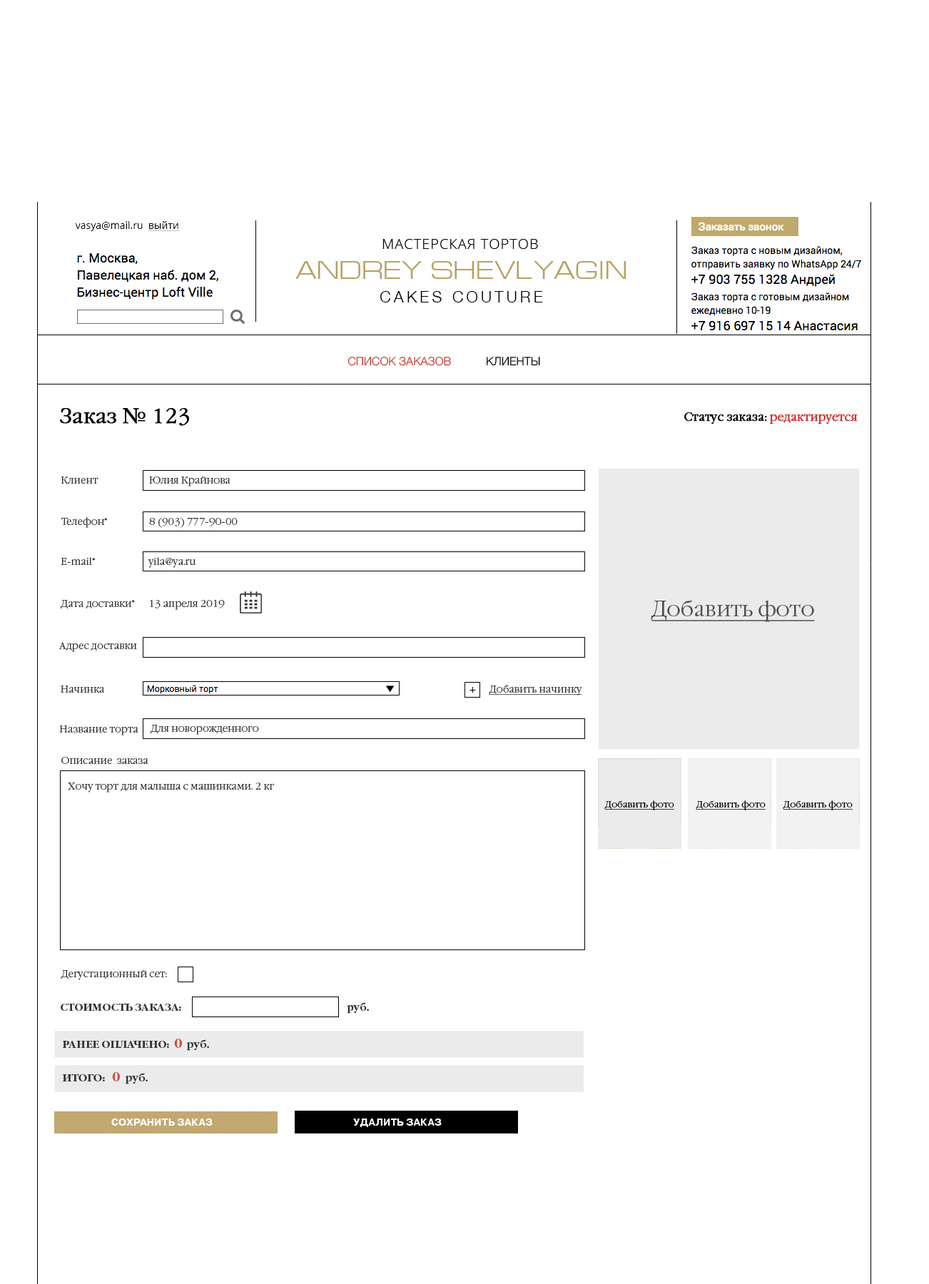
<style>
.page{position:relative;width:929px;height:1284px;background:#ffffff}
.page>*{position:absolute;margin:0}
.t1{font:11.4px "Helvetica-Light";color:#c03728;text-transform:uppercase}
.t2{font:11.4px "Helvetica-Light";color:#000000;text-transform:uppercase}
.t3{font:20.3px "GaramondC-Light";color:#000000;font-weight:bold}
.t4{font:11.4px "GaramondC-Light";color:#000000;font-weight:bold}
.t5{font:11.4px "GaramondC-Light";color:#cc3333;font-weight:bold}
.t6{font:10px "GaramondC-Light";color:#333333}
.t7{font:21.4px "GaramondC-Light";color:#4f4f4f;text-decoration:underline}
.t8{font:10px "GaramondC-Light";color:#000000}
.t9{font:10px "GaramondC-Light";color:#333333;text-decoration:underline}
.t10{font:9.1px "GaramondC-Light";color:#000000;text-decoration:underline}
.t11{font:10px "GaramondC-Bold";color:#333333}
.t12{font:12.8px "GaramondC-Bold";color:#ce4c3e}
.t13{font:10px "PragmaticaBold-Reg";color:#ffffff}
</style>
<div class="page">
<p class="t1" style="left:347px;top:357px;width:193px;height:9px">Список заказов<span class="t2">           Клиенты</span></p>
<p class="t3" style="left:60px;top:408px;width:129px;height:18px">Заказ № 123</p>
<p class="t4" style="left:684px;top:412px;width:173px;height:12px">Статус заказа:<span class="t5"> редактируется</span></p>
<p class="t6" style="left:61px;top:476px;width:169px;height:10px">Клиент                      Юлия Крайнова</p>
<p class="t6" style="left:61px;top:517px;width:177px;height:11px">Телефон*                  8 (903) 777-90-00</p>
<p class="t6" style="left:61px;top:557px;width:134px;height:11px">E-mail*                       yila@ya.ru</p>
<p class="t6" style="left:60px;top:599px;width:165px;height:11px">Дата доставки*      13 апреля 2019</p>
<p class="t7" style="left:651px;top:600px;width:164px;height:22px">Добавить фото</p>
<p class="t6" style="left:58px;top:642px;width:79px;height:10px">Адрес доставки</p>
<p class="t6" style="left:61px;top:685px;width:44px;height:8px">Начинка</p>
<p class="t8" style="left:469px;top:687px;width:7px;height:6px">+</p>
<p class="t9" style="left:489px;top:685px;width:93px;height:10px">Добавить начинку</p>
<p class="t6" style="left:59px;top:725px;width:79px;height:10px">Название торта</p>
<p class="t6" style="left:150px;top:725px;width:109px;height:10px">Для новорожденного</p>
<p class="t6" style="left:61px;top:757px;width:87px;height:7px">Описание  заказа</p>
<p class="t6" style="left:68px;top:782px;width:206px;height:10px">Хочу торт для малыша с машинками. 2 кг</p>
<p class="t10" style="left:604px;top:800px;width:70px;height:10px">Добавить фото</p>
<p class="t10" style="left:695px;top:800px;width:70px;height:10px">Добавить фото</p>
<p class="t10" style="left:782px;top:800px;width:70px;height:10px">Добавить фото</p>
<p class="t6" style="left:61px;top:969px;width:106px;height:11px">Дегустационный сет:</p>
<p class="t11" style="left:61px;top:1002px;width:308px;height:12px">СТОИМОСТЬ ЗАКАЗА:                                                                 руб.</p>
<p class="t11" style="left:62px;top:1039px;width:147px;height:12px">РАНЕЕ ОПЛАЧЕНО:  <span class="t12">0</span>  руб.</p>
<p class="t11" style="left:62px;top:1072px;width:86px;height:12px">ИТОГО:   <span class="t12">0 </span> руб.</p>
<p class="t13" style="left:111px;top:1118px;width:102px;height:8px">СОХРАНИТЬ ЗАКАЗ</p>
<p class="t13" style="left:353px;top:1118px;width:89px;height:9px">УДАЛИТЬ ЗАКАЗ</p>
</div>
